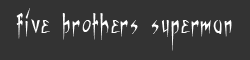
<style>
.page{position:relative;width:250px;height:60px;background:#333333}
.page>*{position:absolute;margin:0}
.t1{font:52px "Vampiress";color:#ffffff}
</style>
<div class="page">
<p class="t1" style="left:16px;top:8px;width:216px;height:43px">five brothers superman</p>
</div>
